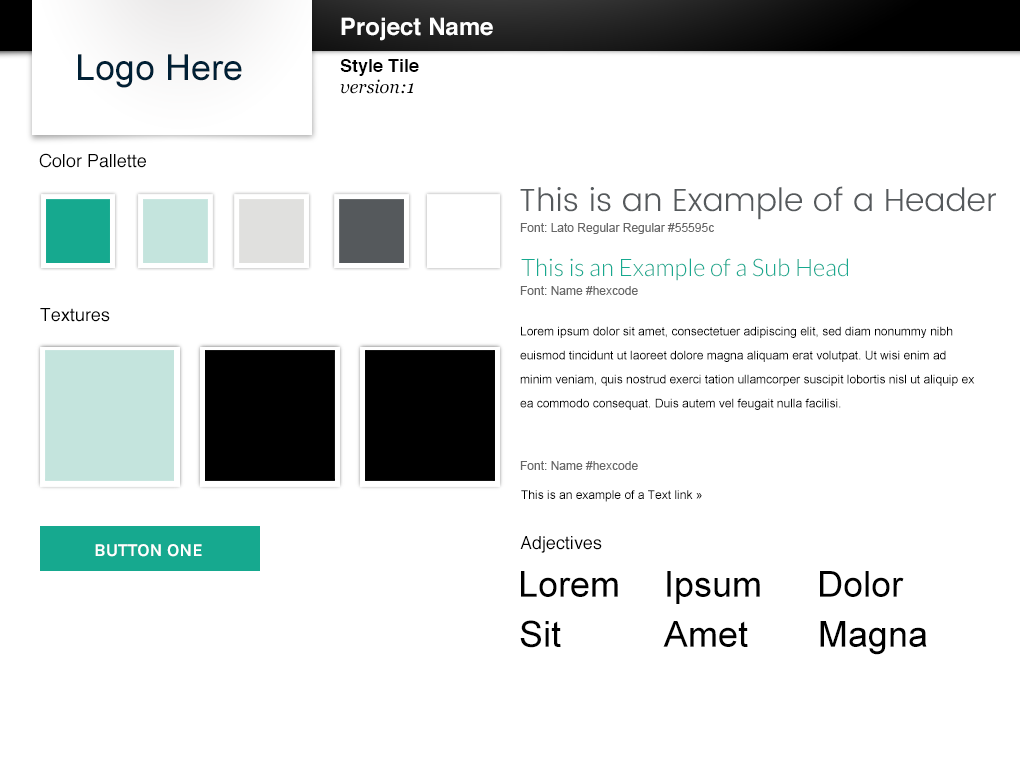
<style>
.page{position:relative;width:1020px;height:760px;background:#ffffff}
.page>*{position:absolute;margin:0}
.t1{font:24px "Helvetica-Bold";color:#ffffff}
.t2{font:36px "ArialMT";color:#002035}
.t3{font:18px "Helvetica-Bold";color:#000000}
.t4{font:18px "Georgia-Italic";color:#000000}
.t5{font:18px "Helvetica";color:#000000}
.t6{font:32px "Poppins-Light";color:#55595c}
.t7{font:12px "ArialMT";color:#666666}
.t8{font:24px "Lato-Light";color:#16a98f}
.t9{font:12px/24px "ArialMT";color:#000000}
.t10{font:12px "ArialMT";color:#000000}
.t11{font:18px "Karla-Bold";color:#ffffff}
.t12{font:36px "ArialMT";color:#000000}
</style>
<div class="page">
<p class="t1" style="left:341px;top:17px;width:152px;height:24px">Project Name</p>
<p class="t2" style="left:78px;top:54px;width:164px;height:34px">Logo Here</p>
<p class="t3" style="left:340px;top:59px;width:79px;height:17px">Style Tile</p>
<p class="t4" style="left:340px;top:79px;width:74px;height:15px">version:1</p>
<p class="t5" style="left:39px;top:153px;width:107px;height:15px">Color Pallette</p>
<p class="t6" style="left:520px;top:186px;width:476px;height:34px">This is an Example of a Header</p>
<p class="t7" style="left:520px;top:223px;width:194px;height:11px">Font: Lato Regular Regular #55595c</p>
<p class="t8" style="left:521px;top:258px;width:327px;height:23px">This is an Example of a Sub Head</p>
<p class="t7" style="left:520px;top:286px;width:118px;height:9px">Font: Name #hexcode</p>
<p class="t5" style="left:40px;top:308px;width:70px;height:14px">Textures</p>
<p class="t9" style="left:520px;top:326px;width:455px;height:84px">Lorem ipsum dolor sit amet, consectetuer adipiscing elit, sed diam nonummy nibh euismod tincidunt ut laoreet dolore magna aliquam erat volutpat. Ut wisi enim ad minim veniam, quis nostrud exerci tation ullamcorper suscipit lobortis nisl ut aliquip ex ea commodo consequat. Duis autem vel feugait nulla facilisi.</p>
<p class="t7" style="left:520px;top:461px;width:118px;height:9px">Font: Name #hexcode</p>
<p class="t10" style="left:521px;top:490px;width:181px;height:12px">This is an example of a Text link »</p>
<p class="t11" style="left:95px;top:544px;width:107px;height:13px">BUTTON ONE</p>
<p class="t5" style="left:520px;top:536px;width:82px;height:17px">Adjectives</p>
<p class="t12" style="left:521px;top:571px;width:97px;height:26px">Lorem</p>
<p class="t12" style="left:667px;top:571px;width:93px;height:33px">Ipsum</p>
<p class="t12" style="left:820px;top:571px;width:84px;height:26px">Dolor</p>
<p class="t12" style="left:520px;top:620px;width:41px;height:28px">Sit</p>
<p class="t12" style="left:663px;top:621px;width:85px;height:26px">Amet</p>
<p class="t12" style="left:820px;top:621px;width:107px;height:34px">Magna</p>
</div>
